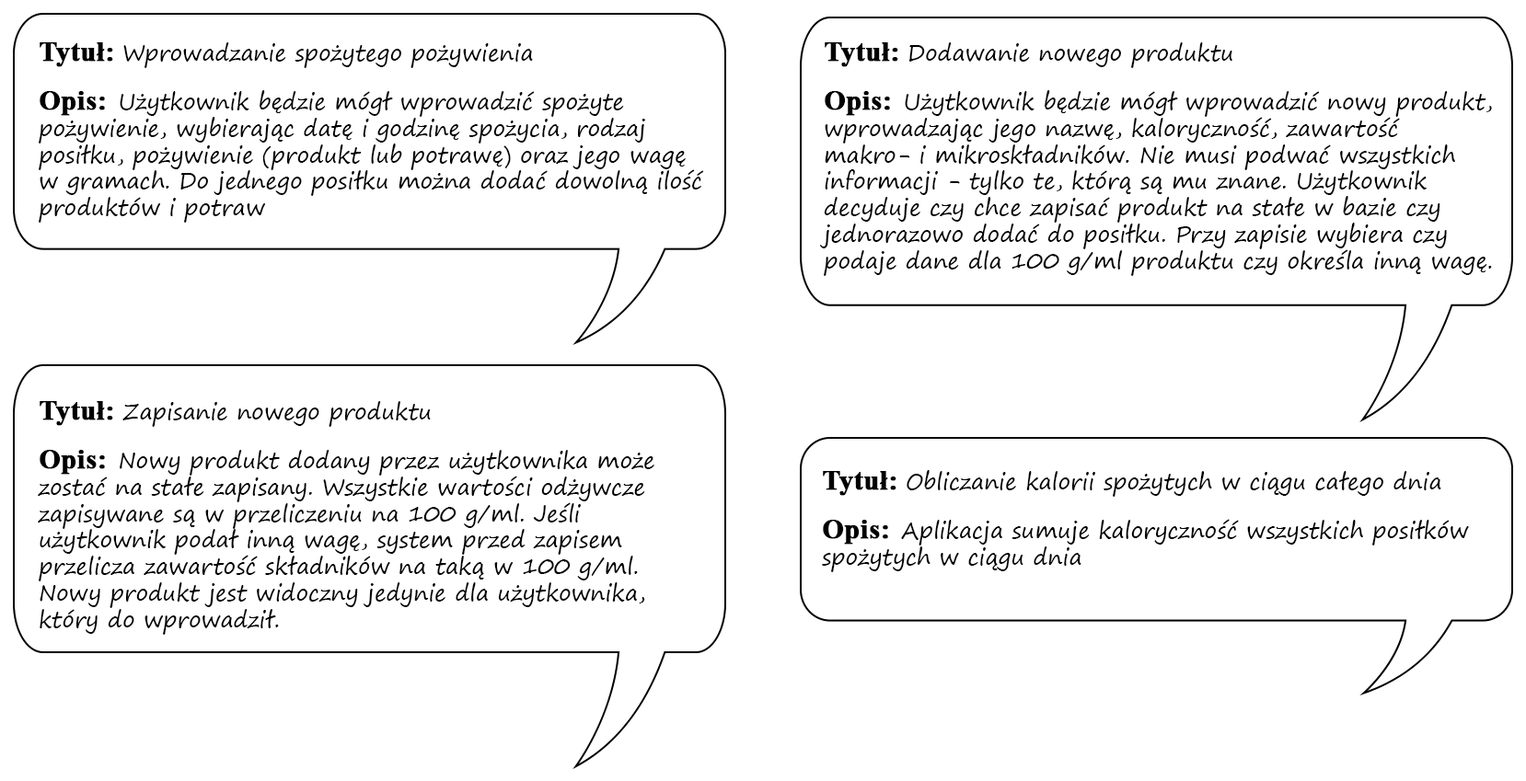
<style>
.page{position:relative;width:1526px;height:781px;background:#ffffff}
.page>*{position:absolute;margin:0}
.t1{font:22.1px "SegoePrint";color:#000000}
.t2{font:27.6px "TimesNewRomanPS-BoldMT";color:#000000;font-weight:bold}
</style>
<div class="page">
<p class="t1" style="left:39px;top:42px;width:665px;height:181px"><span class="t2">Tytuł: </span>Wprowadzanie spożytego pożywienia<br><br><span class="t2">Opis:  </span>Użytkownik będzie mógł wprowadzić spożyte pożywienie, wybierając datę i godzinę spożycia, rodzaj posiłku, pożywienie (produkt lub potrawę) oraz jego wagę w gramach. Do jednego posiłku można dodać dowolną ilość produktów i potraw</p>
<p class="t1" style="left:820px;top:42px;width:672px;height:234px"><span class="t2">Tytuł: </span>Dodawanie nowego produktu<br><br><span class="t2">Opis:  </span>Użytkownik będzie mógł wprowadzić nowy produkt, wprowadzając jego nazwę, kaloryczność, zawartość makro- i mikroskładników. Nie musi podwać wszystkich informacji - tylko te, którą są mu znane. Użytkownik decyduje czy chce zapisać produkt na stałe w bazie czy jednorazowo dodać do posiłku. Przy zapisie wybiera czy podaje dane dla 100 g/ml produktu czy określa inną wagę.</p>
<p class="t1" style="left:38px;top:401px;width:616px;height:234px"><span class="t2">Tytuł: </span>Zapisanie nowego produktu<br><br><span class="t2">Opis:  </span>Nowy produkt dodany przez użytkownika może zostać na stałe zapisany. Wszystkie wartości odżywcze zapisywane są w przeliczeniu na 100 g/ml. Jeśli użytkownik podał inną wagę, system przed zapisem przelicza zawartość składników na taką w 100 g/ml. Nowy produkt jest widoczny jedynie dla użytkownika, który do wprowadził.</p>
<p class="t1" style="left:822px;top:470px;width:647px;height:102px"><span class="t2">Tytuł: </span>Obliczanie kalorii spożytych w ciągu całego dnia<br><br><span class="t2">Opis:  </span>Aplikacja sumuje kaloryczność wszystkich posiłków spożytych w ciągu dnia</p>
</div>
